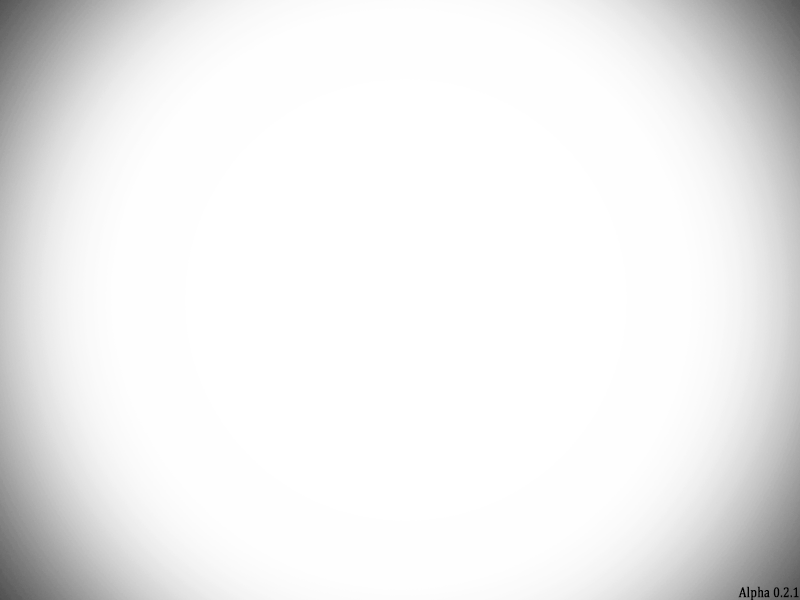
<style>
.page{position:relative;width:800px;height:600px;background:#ffffff}
.page>*{position:absolute;margin:0}
.t1{font:14.4px "Cambria";color:#000000;font-weight:bold;scale:0.83 1}
</style>
<div class="page">
<p class="t1" style="left:738px;top:586px;width:61px;height:15px">Alpha 0.2.1</p>
</div>
